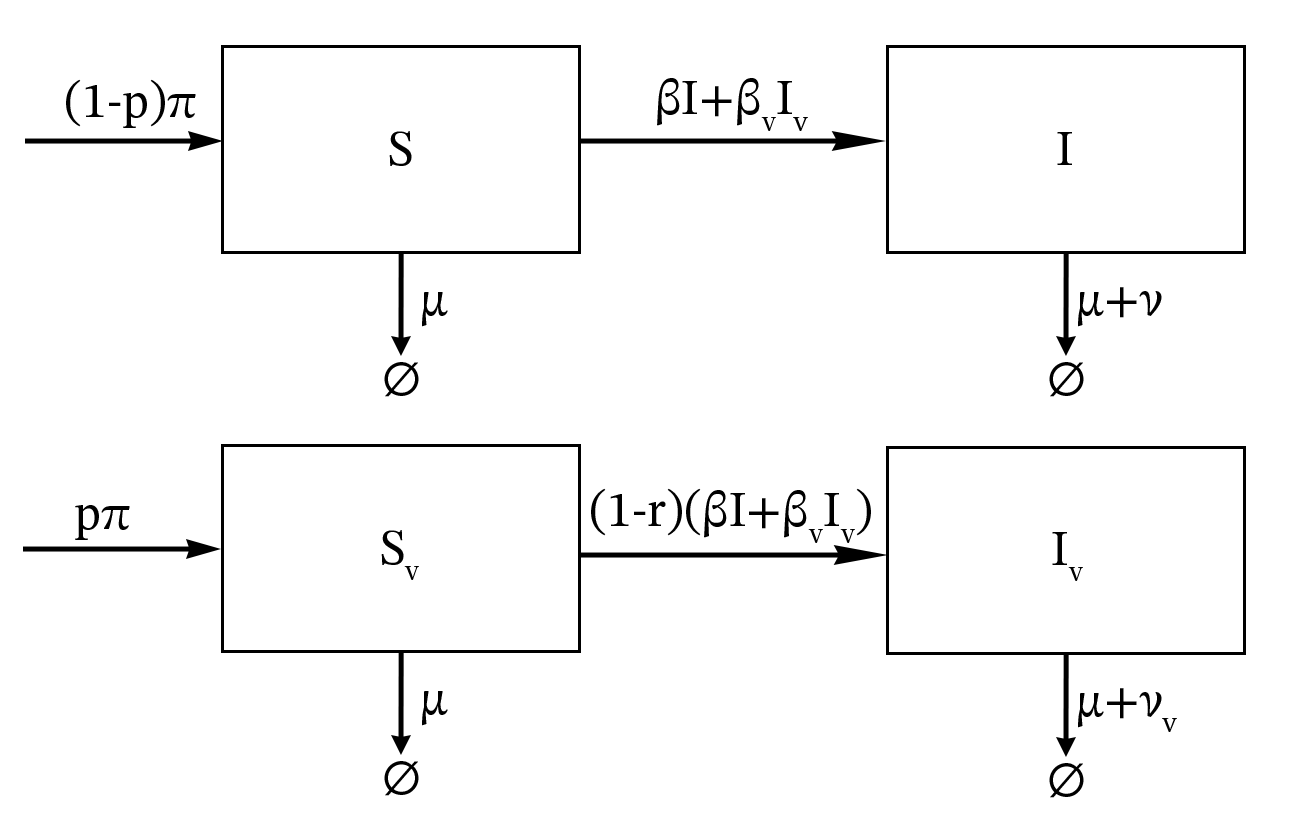
<style>
.page{position:relative;width:1312px;height:823px;background:#ffffff}
.page>*{position:absolute;margin:0}
.t1{font:50px "STIXTwoMath";color:#000000}
.t2{font:50px "STIXTwoMath";color:#000000;font-variant:small-caps}
</style>
<div class="page">
<p class="t1" style="left:657px;top:78px;width:151px;height:53px">βI+βvIv</p>
<p class="t1" style="left:66px;top:79px;width:130px;height:49px">(1-p)π</p>
<p class="t1" style="left:389px;top:131px;width:23px;height:35px">S</p>
<p class="t1" style="left:1057px;top:132px;width:15px;height:33px">I</p>
<p class="t1" style="left:422px;top:292px;width:26px;height:35px">μ</p>
<p class="t1" style="left:1078px;top:287px;width:84px;height:40px">μ+ν</p>
<p class="t1" style="left:384px;top:362px;width:35px;height:35px">∅</p>
<p class="t1" style="left:1049px;top:362px;width:35px;height:35px">∅</p>
<p class="t1" style="left:591px;top:488px;width:280px;height:55px">(1-r)(βI+βvIv)</p>
<p class="t1" style="left:75px;top:505px;width:55px;height:35px">pπ</p>
<p class="t1" style="left:381px;top:530px;width:38px;height:50px">Sv</p>
<p class="t1" style="left:1052px;top:532px;width:31px;height:49px">Iv<br><span class="t2">v</span></p>
<p class="t1" style="left:1078px;top:688px;width:99px;height:44px">μ+νv</p>
<p class="t1" style="left:422px;top:691px;width:26px;height:35px">μ</p>
<p class="t1" style="left:384px;top:761px;width:35px;height:35px">∅</p>
<p class="t1" style="left:1049px;top:763px;width:35px;height:35px">∅</p>
</div>
